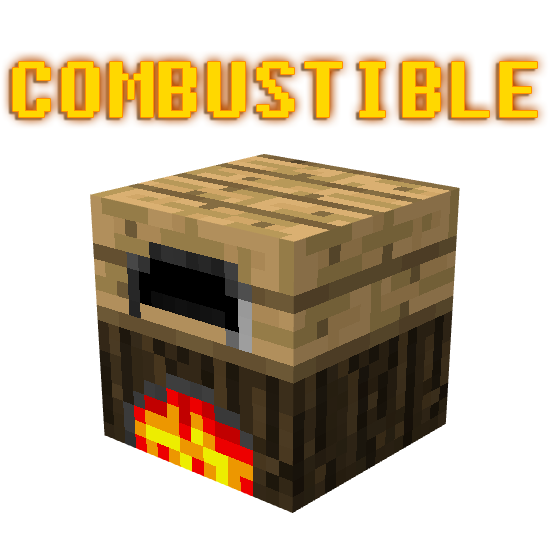
<style>
.page{position:relative;width:550px;height:550px;background:#ffffff}
.page>*{position:absolute;margin:0}
.t1{font:78px "Fixedsys";color:#ffd800}
</style>
<div class="page">
<p class="t1" style="left:13px;top:62px;width:524px;height:55px">COMBUSTIBLE</p>
</div>
